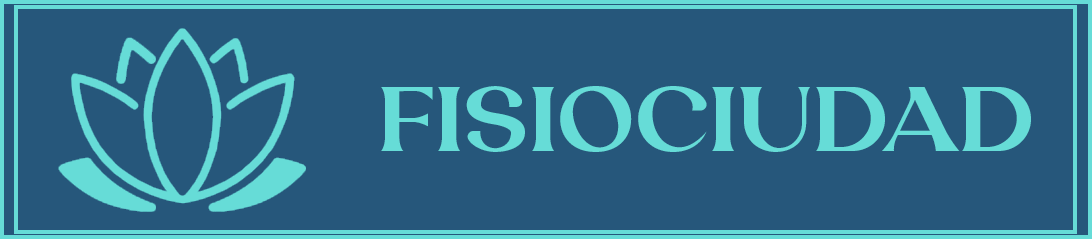
<style>
.page{position:relative;width:1092px;height:239px;background:#26577b}
.page>*{position:absolute;margin:0}
.t1{font:91.7px "LaviossaMedium";color:#66dcd7}
</style>
<div class="page">
<p class="t1" style="left:381px;top:86px;width:650px;height:66px">FISIOCIUDAD</p>
</div>
